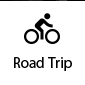
<style>
.page{position:relative;width:85px;height:85px;background:#ffffff}
.page>*{position:absolute;margin:0}
.t1{font:15px "MyriadPro-Regular"}
</style>
<div class="page">
<p class="t1" style="left:14px;top:56px;width:58px;height:14px">Road Trip</p>
</div>
